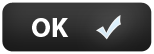
<style>
.page{position:relative;width:154px;height:54px}
.page>*{position:absolute;margin:0}
.t1{font:28px "MyriadPro-Bold";color:#ffffff}
</style>
<div class="page">
<p class="t1" style="left:32px;top:18px;width:37px;height:19px">OK</p>
</div>
